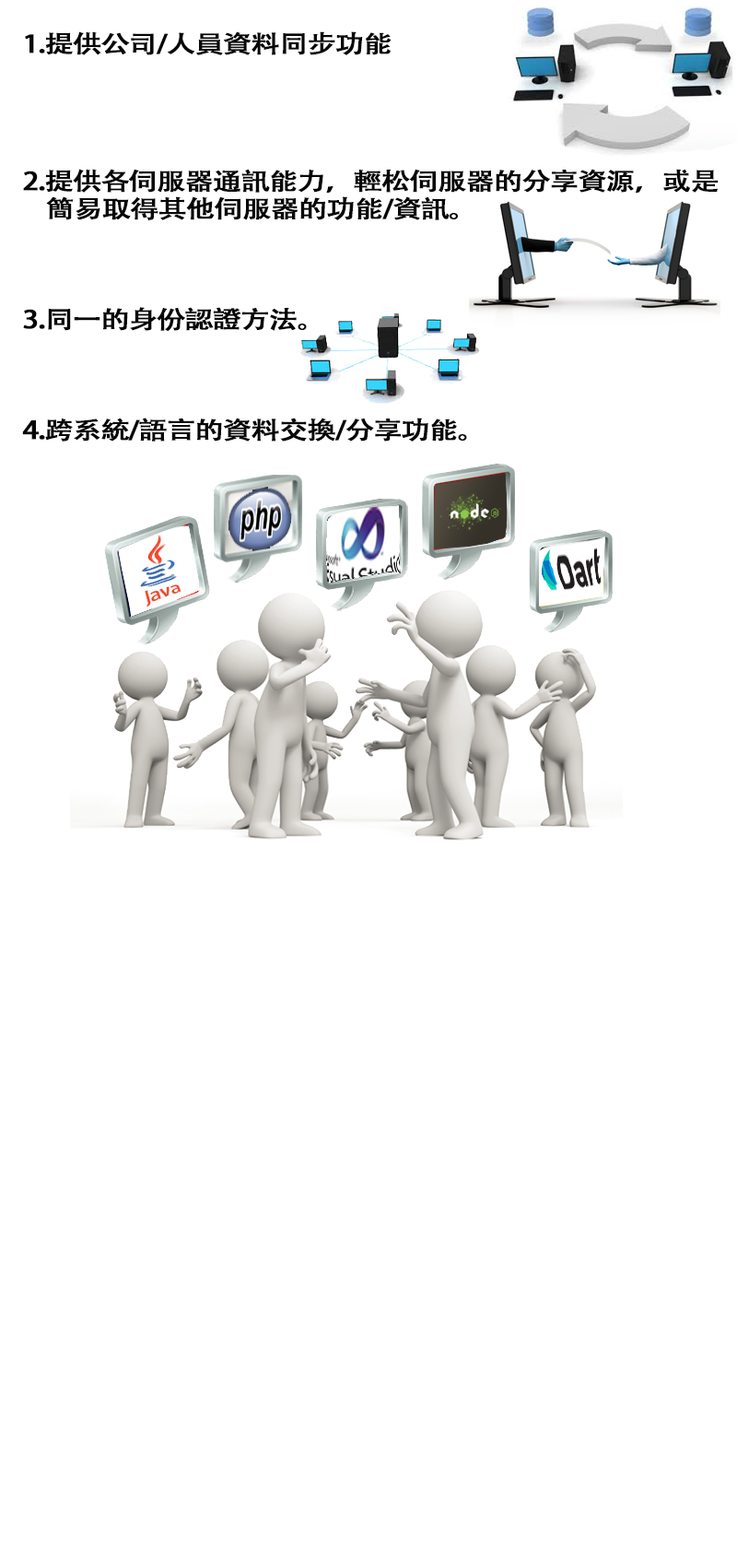
<style>
.page{position:relative;width:737px;height:1568px;background:#ffffff}
.page>*{position:absolute;margin:0}
.t1{font:24.3px/27.7px "AdobeHeitiStd-Regular";letter-spacing:-0.05em;color:#060606;font-weight:bold;scale:1.18 1}
</style>
<div class="page">
<p class="t1" style="left:22px;top:31px;width:697px;height:411px">1.提供公司/人員資料同步功能<br><br><br><br><br>2.提供各伺服器通訊能力，輕松伺服器的分享資源，或是<br>    簡易取得其他伺服器的功能/資訊。<br><br><br><br>3.同一的身份認證方法。<br><br><br><br>4.跨系統/語言的資料交換/分享功能。</p>
</div>
